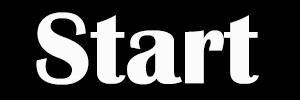
<style>
.page{position:relative;width:300px;height:100px;background:#000000}
.page>*{position:absolute;margin:0}
.t1{font:104.2px "BritannicBold";color:#fcfcfc}
</style>
<div class="page">
<p class="t1" style="left:36px;top:12px;width:223px;height:73px">Start</p>
</div>
